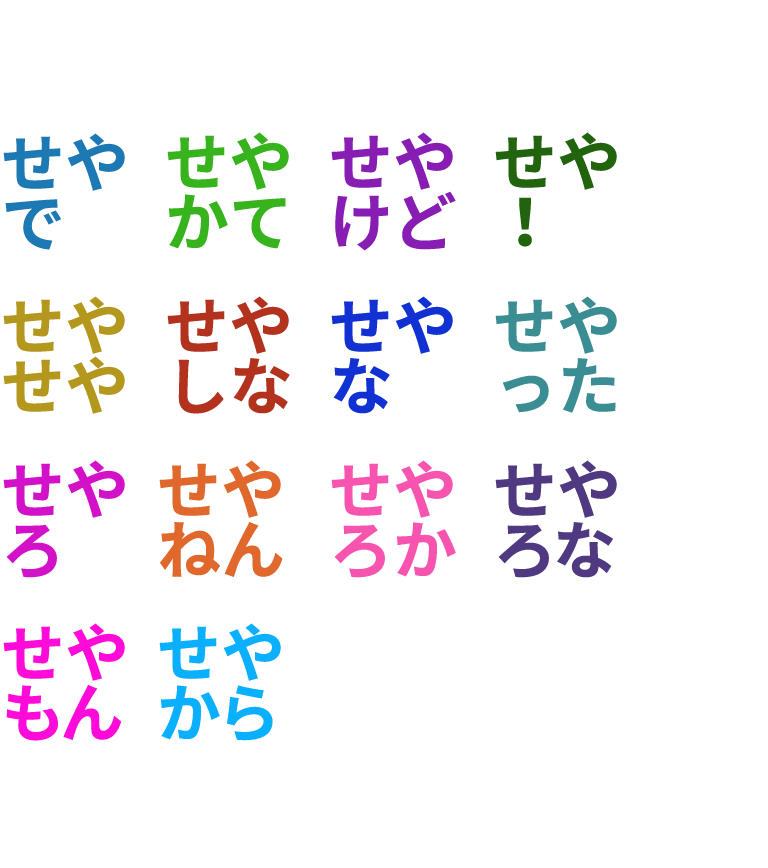
<style>
.page{position:relative;width:768px;height:868px;background:#ffffff}
.page>*{position:absolute;margin:0}
.t1{font:64px/60px "NotoSansJP-Bold";color:#1d79b3}
.t2{font:64px/60px "NotoSansJP-Bold";color:#36b31d}
.t3{font:64px/60px "NotoSansJP-Bold";color:#871db3}
.t4{font:64px/60px "NotoSansJP-Bold";color:#22640e}
.t5{font:64px/60px "NotoSansJP-Bold";color:#b3981d}
.t6{font:64px/60px "NotoSansJP-Bold";color:#b3321d}
.t7{font:64px/60px "NotoSansJP-Bold";color:#1131d3}
.t8{font:64px/60px "NotoSansJP-Bold";color:#3a8d92}
.t9{font:64px/60px "NotoSansJP-Bold";color:#d311c8}
.t10{font:64px/60px "NotoSansJP-Bold";color:#e0682d}
.t11{font:64px/60px "NotoSansJP-Bold";color:#f754b0}
.t12{font:64px/60px "NotoSansJP-Bold";color:#4f3a81}
.t13{font:64px/60px "NotoSansJP-Bold";color:#fe0ad9}
.t14{font:64px/60px "NotoSansJP-Bold";color:#0ab0fe}
</style>
<div class="page">
<p class="t1" style="left:3px;top:133px;width:122px;height:117px">せや<br>で</p>
<p class="t2" style="left:167px;top:132px;width:122px;height:117px">せや<br>かて</p>
<p class="t3" style="left:331px;top:132px;width:125px;height:119px">せや<br>けど</p>
<p class="t4" style="left:495px;top:132px;width:122px;height:115px">せや<br>！</p>
<p class="t5" style="left:3px;top:296px;width:122px;height:118px">せや<br>せや</p>
<p class="t6" style="left:167px;top:296px;width:123px;height:118px">せや<br>しな</p>
<p class="t7" style="left:331px;top:296px;width:122px;height:118px">せや<br>な</p>
<p class="t8" style="left:495px;top:296px;width:122px;height:117px">せや<br>った</p>
<p class="t9" style="left:3px;top:460px;width:122px;height:118px">せや<br>ろ</p>
<p class="t10" style="left:159px;top:460px;width:124px;height:117px">せや<br>ねん</p>
<p class="t11" style="left:331px;top:460px;width:125px;height:118px">せや<br>ろか</p>
<p class="t12" style="left:495px;top:460px;width:122px;height:118px">せや<br>ろな</p>
<p class="t13" style="left:3px;top:623px;width:122px;height:118px">せや<br>もん</p>
<p class="t14" style="left:159px;top:623px;width:122px;height:118px">せや<br>から</p>
</div>
